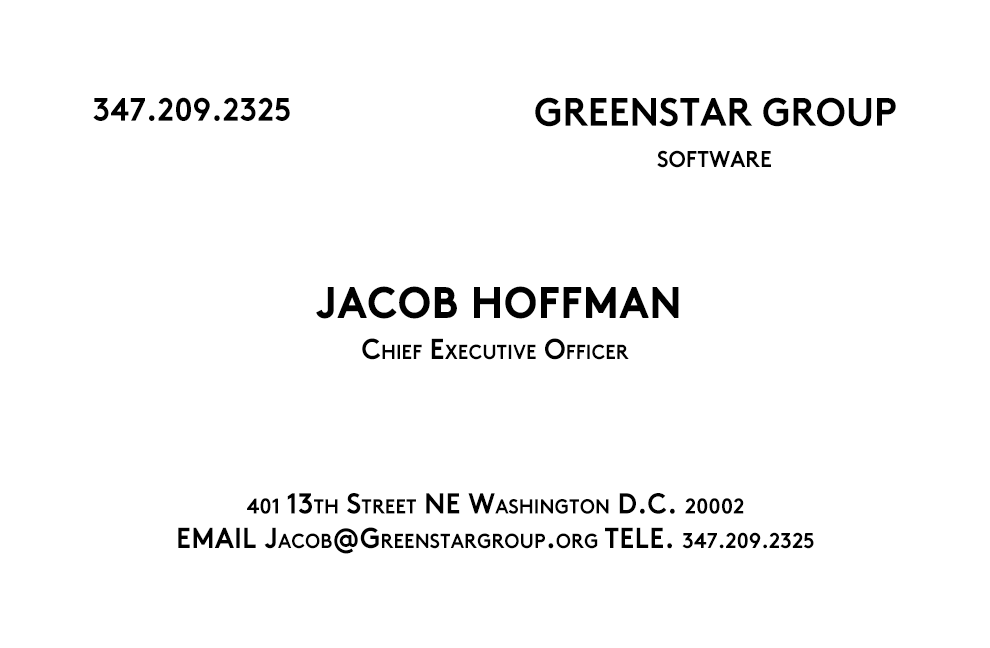
<style>
.page{position:relative;width:990px;height:648px;background:#ffffff}
.page>*{position:absolute;margin:0}
.t1{font:32.4px "Brown-Bold";color:#000000;scale:0.95 1}
.t2{font:39.6px "Brown-Bold";color:#000000;scale:0.95 1}
.t3{font:32.4px "Brown-Bold";color:#000000;font-variant:small-caps;scale:0.95 1}
.t4{font:43.2px "Brown-Bold";color:#000000;font-variant:small-caps;font-weight:bold;scale:0.95 1}
.t5{font:28.8px "Brown-Bold";color:#000000;font-variant:small-caps;scale:0.95 1}
.t6{font:21.6px "Brown-Bold";color:#000000;font-variant:small-caps;scale:0.95 1}
</style>
<div class="page">
<p class="t1" style="left:93px;top:97px;width:197px;height:24px">347.209.2325</p>
<p class="t2" style="left:535px;top:97px;width:361px;height:30px">GREENSTAR GROUP</p>
<p class="t3" style="left:657px;top:150px;width:114px;height:18px">software</p>
<p class="t4" style="left:316px;top:286px;width:363px;height:33px">JACOB HOFFMAN</p>
<p class="t5" style="left:362px;top:338px;width:267px;height:22px">Chief Executive Officer</p>
<p class="t5" style="left:178px;top:493px;width:636px;height:61px;text-align:center"><span class="t6">401 </span>13th Street NE Washington D.C. <span class="t6">20002<br></span>EMAIL Jacob@Greenstargroup.org TELE. <span class="t6">347.209.2325</span></p>
</div>
